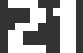
<style>
.page{position:relative;width:83px;height:53px;background:#333333}
.page>*{position:absolute;margin:0}
.t1{font:60px "NokiaCellphoneFC-Small";color:#ffffff;text-transform:uppercase}
</style>
<div class="page">
<p class="t1" style="left:8px;top:0px;width:68px;height:53px">21</p>
</div>
